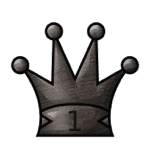
<style>
.page{position:relative;width:150px;height:150px;background:#ffffff}
.page>*{position:absolute;margin:0}
.t1{font:28px "DejaVuSans";color:#141414}
</style>
<div class="page">
<p class="t1" style="left:68px;top:110px;width:13px;height:21px">1</p>
</div>
